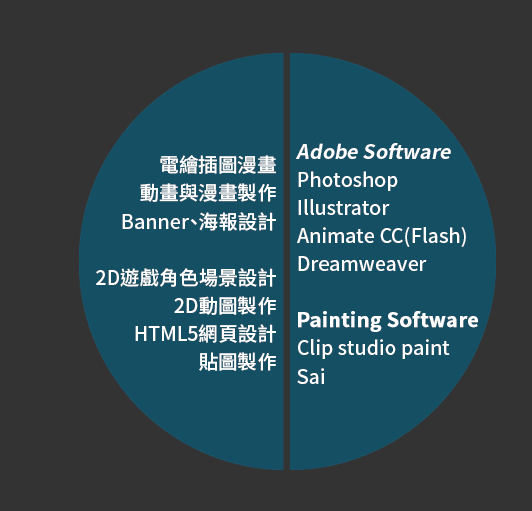
<style>
.page{position:relative;width:532px;height:511px;background:#333333}
.page>*{position:absolute;margin:0}
.t1{font:19.6px/26.1px "NotoSansHant-Medium";color:#ffffff}
.t2{font:19.6px/19.6px "NotoSansHant-Bold";color:#ffffff;font-style:italic}
.t3{font:19.6px/26.1px "NotoSansHant-Bold";color:#ffffff;font-weight:bold}
</style>
<div class="page">
<p class="t1" style="left:296px;top:143px;width:182px;height:241px"><span class="t2">Adobe Software<br></span>Photoshop<br>Illustrator<br>Animate CC(Flash)<br>Dreamweaver<br><br><span class="t3">Painting Software<br></span>Clip studio paint<br>Sai</p>
<p class="t1" style="left:96px;top:155px;width:180px;height:216px;text-align:right">電繪插圖漫畫<br>動畫與漫畫製作<br>Banner、海報設計<br><br>2D遊戲角色場景設計<br>2D動圖製作<br>HTML5網頁設計<br>貼圖製作</p>
</div>
